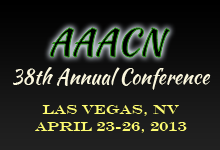
<style>
.page{position:relative;width:220px;height:150px}
.page>*{position:absolute;margin:0}
.t1{font:36px "KaushanScript-Regular";color:#010101}
.t2{font:20px "KaushanScript-Regular";color:#fbf7dd}
.t3{font:14px "EngraversMT";color:#fbf96f}
</style>
<div class="page">
<p class="t1" style="left:50px;top:28px;width:120px;height:29px">AAACN</p>
<p class="t2" style="left:13px;top:67px;width:198px;height:23px">38th Annual Conference</p>
<p class="t3" style="left:35px;top:105px;width:152px;height:28px;text-align:center">Las Vegas, NV<br>April 23-26, 2013</p>
</div>
